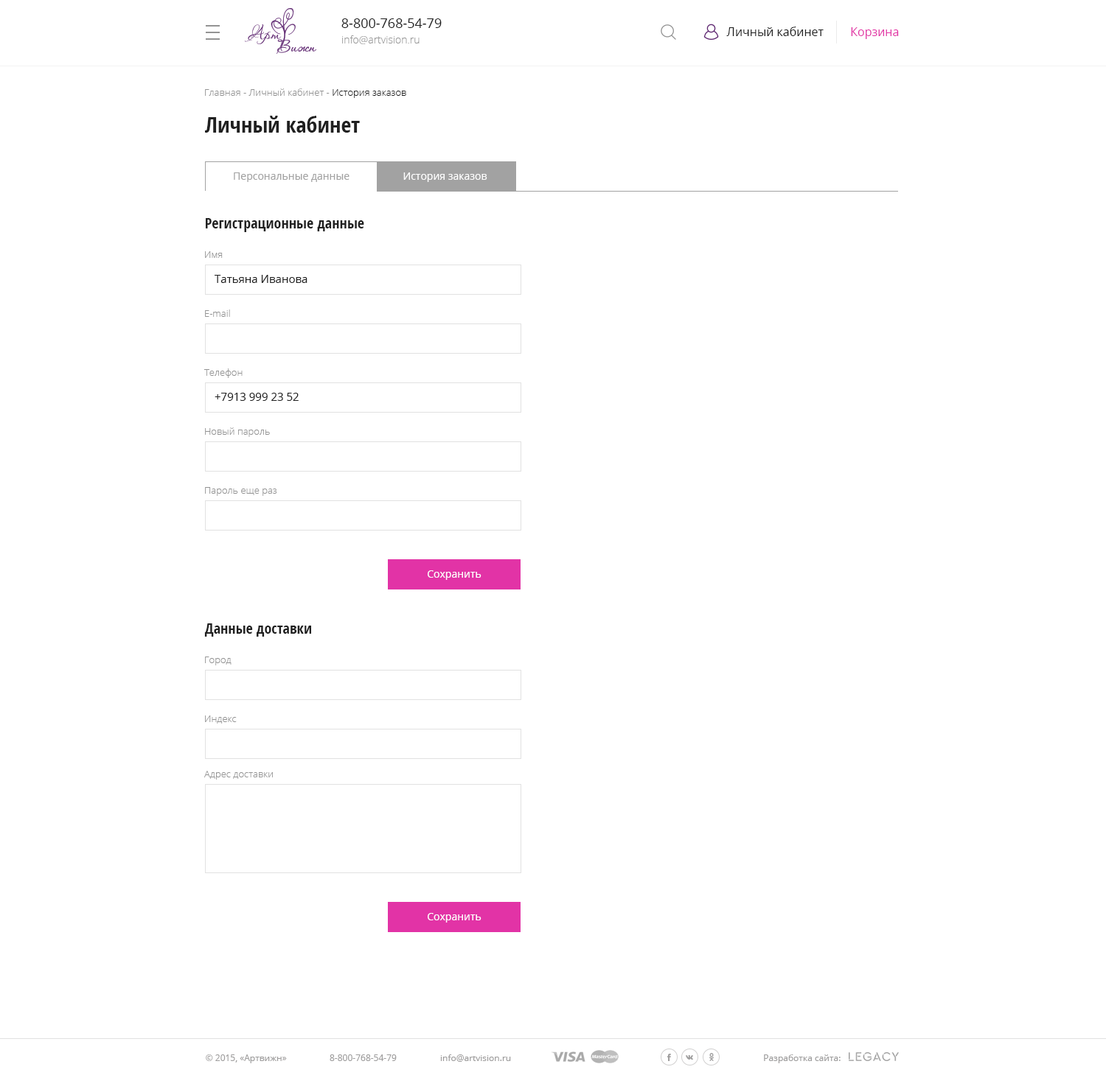
<style>
.page{position:relative;width:1106px;height:1078px;background:#ffffff}
.page>*{position:absolute;margin:0}
.t1{font:13.3px "OpenSans";color:#202020}
.t2{font:11.8px "OpenSans";color:#202020}
.t3{font:11.8px "OpenSans";color:#e233a6}
.t4{font:10.3px "OpenSans-Light";color:#999999}
.t5{font:9.6px "OpenSans-Light";color:#939393}
.t6{font:9.6px "OpenSans-Light";color:#202020}
.t7{font:22.1px "OpenSans-CondensedBold";color:#202020}
.t8{font:10.3px "OpenSans";color:#a2a2a2}
.t9{font:10.3px "OpenSans";color:#ffffff}
.t10{font:14.7px "OpenSans-CondensedBold";color:#202020}
.t11{font:11.1px "OpenSans";color:#202020}
.t12{font:8.8px "OpenSans";color:#9e9d9d}
</style>
<div class="page">
<p class="t1" style="left:341px;top:18px;width:101px;height:10px">8-800-768-54-79</p>
<p class="t2" style="left:726px;top:27px;width:97px;height:9px">Личный кабинет</p>
<p class="t3" style="left:851px;top:27px;width:48px;height:12px">Корзина</p>
<p class="t4" style="left:342px;top:35px;width:77px;height:9px">info@artvision.ru</p>
<p class="t5" style="left:205px;top:88px;width:201px;height:10px">Главная - Личный кабинет - <span class="t6">История заказов</span></p>
<p class="t7" style="left:205px;top:116px;width:155px;height:17px">Личный кабинет</p>
<p class="t8" style="left:234px;top:172px;width:115px;height:10px">Персональные данные</p>
<p class="t9" style="left:403px;top:172px;width:84px;height:10px">История заказов</p>
<p class="t10" style="left:206px;top:218px;width:158px;height:14px">Регистрационные данные</p>
<p class="t5" style="left:205px;top:251px;width:18px;height:7px">Имя</p>
<p class="t11" style="left:215px;top:275px;width:92px;height:8px">Татьяна Иванова</p>
<p class="t5" style="left:205px;top:310px;width:25px;height:7px">E-mail</p>
<p class="t5" style="left:203px;top:369px;width:40px;height:9px">Телефон</p>
<p class="t11" style="left:215px;top:393px;width:84px;height:8px">+7913 999 23 52</p>
<p class="t5" style="left:205px;top:428px;width:65px;height:9px">Новый пароль</p>
<p class="t5" style="left:205px;top:487px;width:72px;height:9px">Пароль еще раз</p>
<p class="t9" style="left:428px;top:571px;width:53px;height:9px">Сохранить</p>
<p class="t10" style="left:204px;top:624px;width:107px;height:13px">Данные доставки</p>
<p class="t5" style="left:205px;top:657px;width:26px;height:9px">Город</p>
<p class="t5" style="left:205px;top:716px;width:32px;height:8px">Индекс</p>
<p class="t5" style="left:204px;top:771px;width:69px;height:9px">Адрес доставки</p>
<p class="t9" style="left:428px;top:913px;width:53px;height:10px">Сохранить</p>
<p class="t12" style="left:206px;top:1055px;width:81px;height:9px">© 2015, «Артвижн»</p>
<p class="t12" style="left:330px;top:1055px;width:67px;height:6px">8-800-768-54-79</p>
<p class="t12" style="left:440px;top:1055px;width:71px;height:7px">info@artvision.ru</p>
<p class="t12" style="left:764px;top:1055px;width:76px;height:9px">Разработка сайта:</p>
</div>
